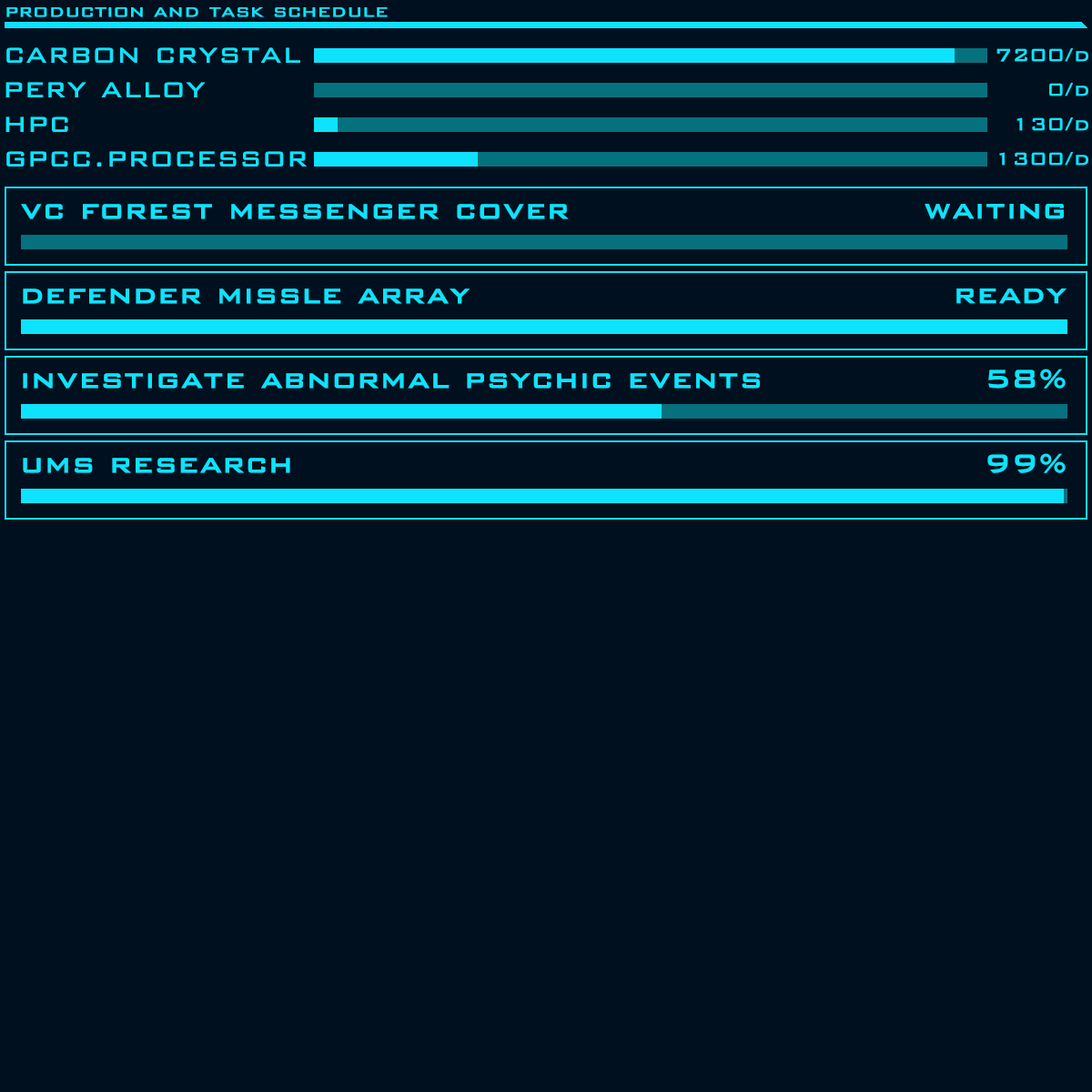
<style>
.page{position:relative;width:1092px;height:1092px;background:#00101e}
.page>*{position:absolute;margin:0}
.t1{font:22px "BankGothicBT-Light";color:#0de3fe;font-weight:bold}
.t2{font:34.1px "BankGothicBT-Light";color:#0de3fe;font-weight:bold}
.t3{font:22.7px "BankGothicBT-Light";color:#0de3fe;font-weight:bold}
.t4{font:34.1px "BankGothicBT-Medium";color:#0de3fe;font-weight:bold}
</style>
<div class="page">
<p class="t1" style="left:6px;top:7px;width:382px;height:10px">production and task schedule</p>
<p class="t2" style="left:6px;top:47px;width:294px;height:16px">carbon crystal</p>
<p class="t3" style="left:996px;top:48px;width:92px;height:14px">7200/d</p>
<p class="t2" style="left:5px;top:82px;width:200px;height:15px">pery alloy</p>
<p class="t3" style="left:1049px;top:83px;width:39px;height:13px">0/d</p>
<p class="t2" style="left:5px;top:116px;width:63px;height:16px">hpc</p>
<p class="t3" style="left:1016px;top:117px;width:72px;height:14px">130/d</p>
<p class="t2" style="left:6px;top:151px;width:301px;height:16px">gpcc.processor</p>
<p class="t3" style="left:999px;top:152px;width:89px;height:14px">1300/d</p>
<p class="t4" style="left:21px;top:204px;width:548px;height:15px">vc forest messenger cover</p>
<p class="t4" style="left:925px;top:204px;width:139px;height:15px">waiting</p>
<p class="t4" style="left:23px;top:288px;width:447px;height:16px">defender missle array</p>
<p class="t4" style="left:956px;top:288px;width:111px;height:16px">ready</p>
<p class="t4" style="left:23px;top:373px;width:737px;height:16px">investigate abnormal psychic events</p>
<p class="t4" style="left:988px;top:369px;width:78px;height:20px">58%</p>
<p class="t4" style="left:23px;top:458px;width:267px;height:15px">ums research</p>
<p class="t4" style="left:987px;top:453px;width:79px;height:20px">99%</p>
</div>
